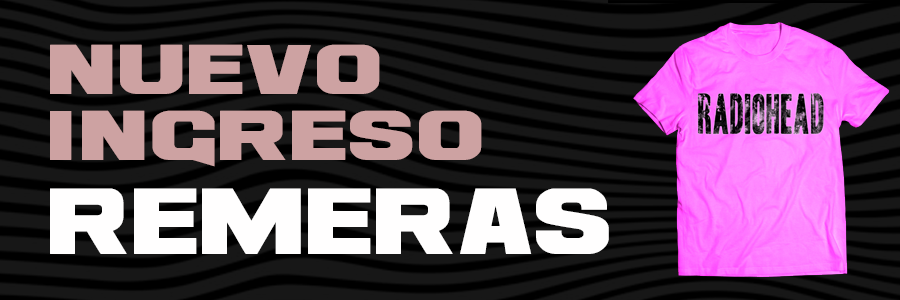
<style>
.page{position:relative;width:900px;height:300px;background:#171717}
.page>*{position:absolute;margin:0}
.t1{font:54.7px "Ash";color:#cda2a2;scale:1.14 1}
.t2{font:72.9px "Ash";color:#fffefe}
</style>
<div class="page">
<p class="t1" style="left:50px;top:44px;width:432px;height:123px">nuevo ingreso</p>
<p class="t2" style="left:50px;top:188px;width:559px;height:66px">remeras</p>
</div>
